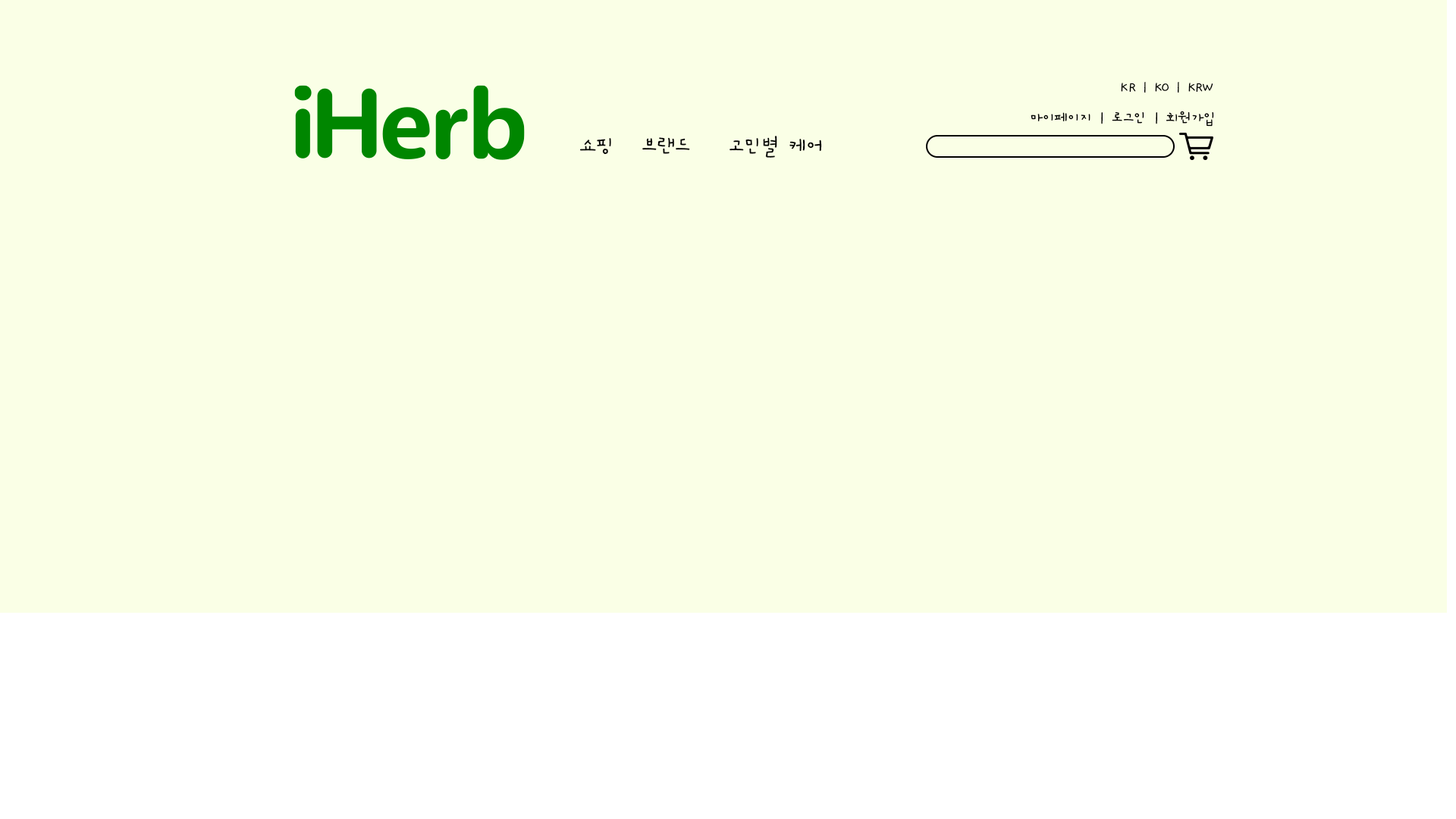
<style>
.page{position:relative;width:1456px;height:819px;background:#faffe6}
.page>*{position:absolute;margin:0}
.t1{font:25px "JGaegujaengyi-Medium";color:#000000}
.t2{font:26.8px "JGaegujaengyi-Medium";color:#000000}
.t3{font:37.9px "JGaegujaengyi-Medium";color:#000000}
</style>
<div class="page">
<p class="t1" style="left:1121px;top:82px;width:92px;height:11px">KR | KO | KRW</p>
<p class="t2" style="left:1031px;top:111px;width:183px;height:16px">마이페이지 | 로그인 | 회원가입</p>
<p class="t3" style="left:580px;top:136px;width:242px;height:22px">쇼핑   브랜드    고민별 케어</p>
</div>
